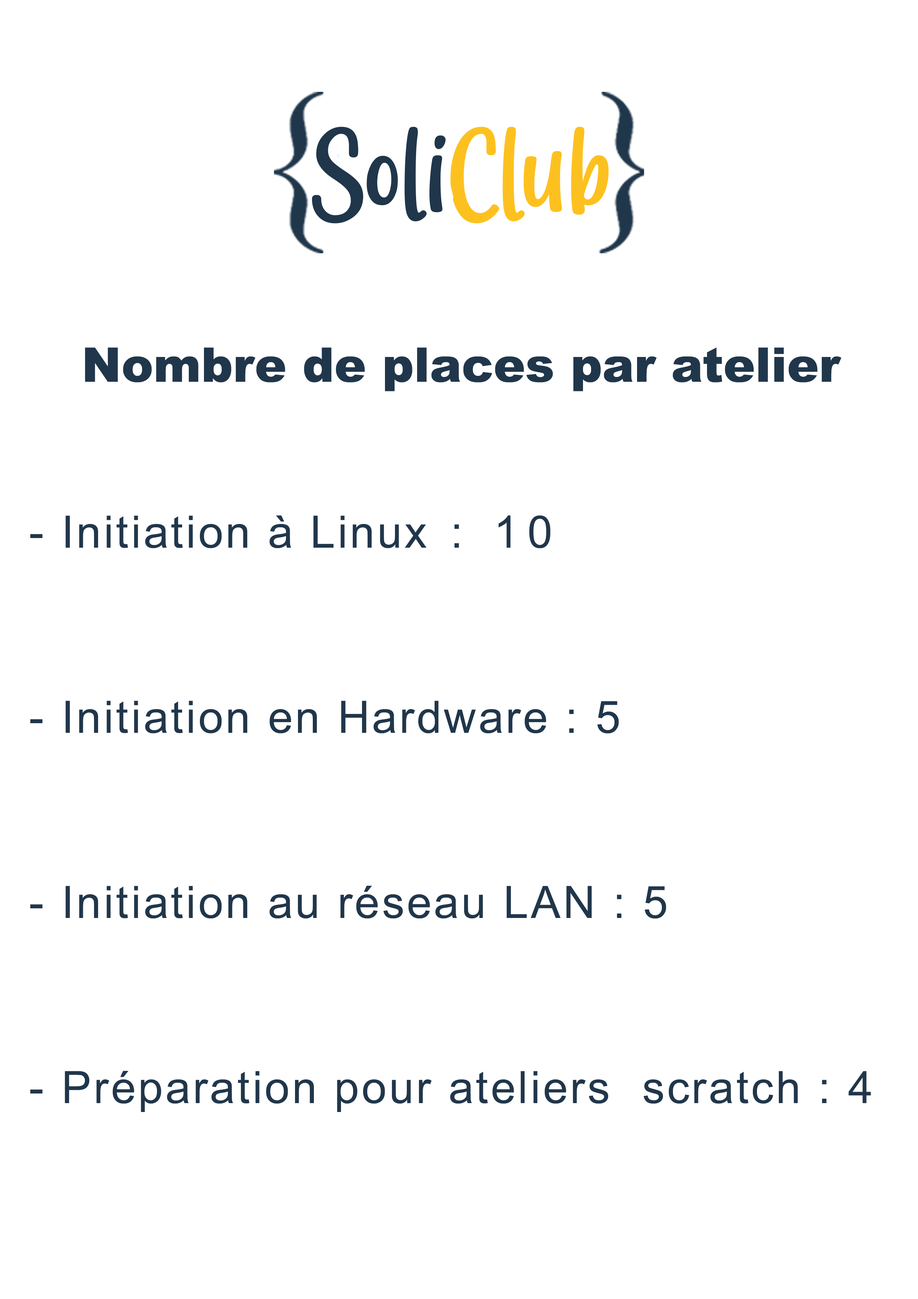
<style>
.page{position:relative;width:918px;height:1299px;background:#ffffff}
.page>*{position:absolute;margin:0}
.t1{font:47.8px "Arial-Black";color:#20364b}
.t2{font:44.7px/185.1px "ArialMT";letter-spacing:0.055em;color:#20364b}
.t3{font:44.7px/185.1px "ArialMT";letter-spacing:0.2em;color:#20364b;text-transform:uppercase}
</style>
<div class="page">
<p class="t1" style="left:85px;top:347px;width:757px;height:44px">Nombre de places par atelier</p>
<p class="t2" style="left:30px;top:515px;width:841px;height:597px">- Initiation à Linux<span class="t3"> : 10<br></span>- Initiation en Hardware : 5<br>- Initiation au réseau LAN : 5<br>- Préparation pour ateliers  scratch : <span class="t3">4</span></p>
</div>
